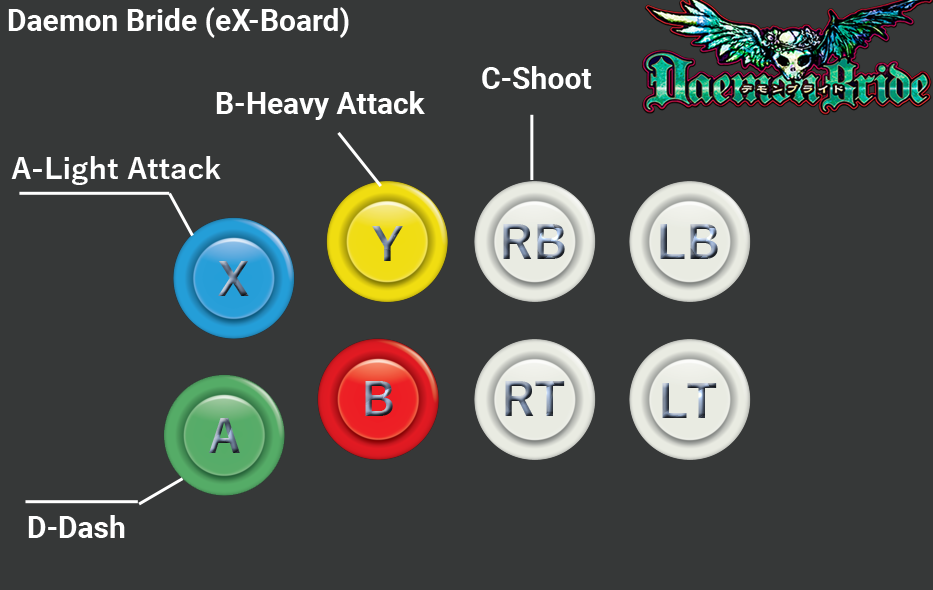
<style>
.page{position:relative;width:933px;height:590px;background:#363838}
.page>*{position:absolute;margin:0}
.t1{font:30px "Roboto-Bold";color:#ffffff}
.t2{font:30px "YuGothic-Bold";color:#ffffff}
</style>
<div class="page">
<p class="t1" style="left:8px;top:7px;width:341px;height:31px">Daemon Bride (eX-Board)</p>
<p class="t1" style="left:482px;top:66px;width:110px;height:23px">C-Shoot</p>
<p class="t1" style="left:216px;top:91px;width:209px;height:29px">B-Heavy Attack</p>
<p class="t2" style="left:11px;top:156px;width:210px;height:29px">A-Light Attack</p>
<p class="t1" style="left:28px;top:515px;width:97px;height:23px">D-Dash</p>
</div>
